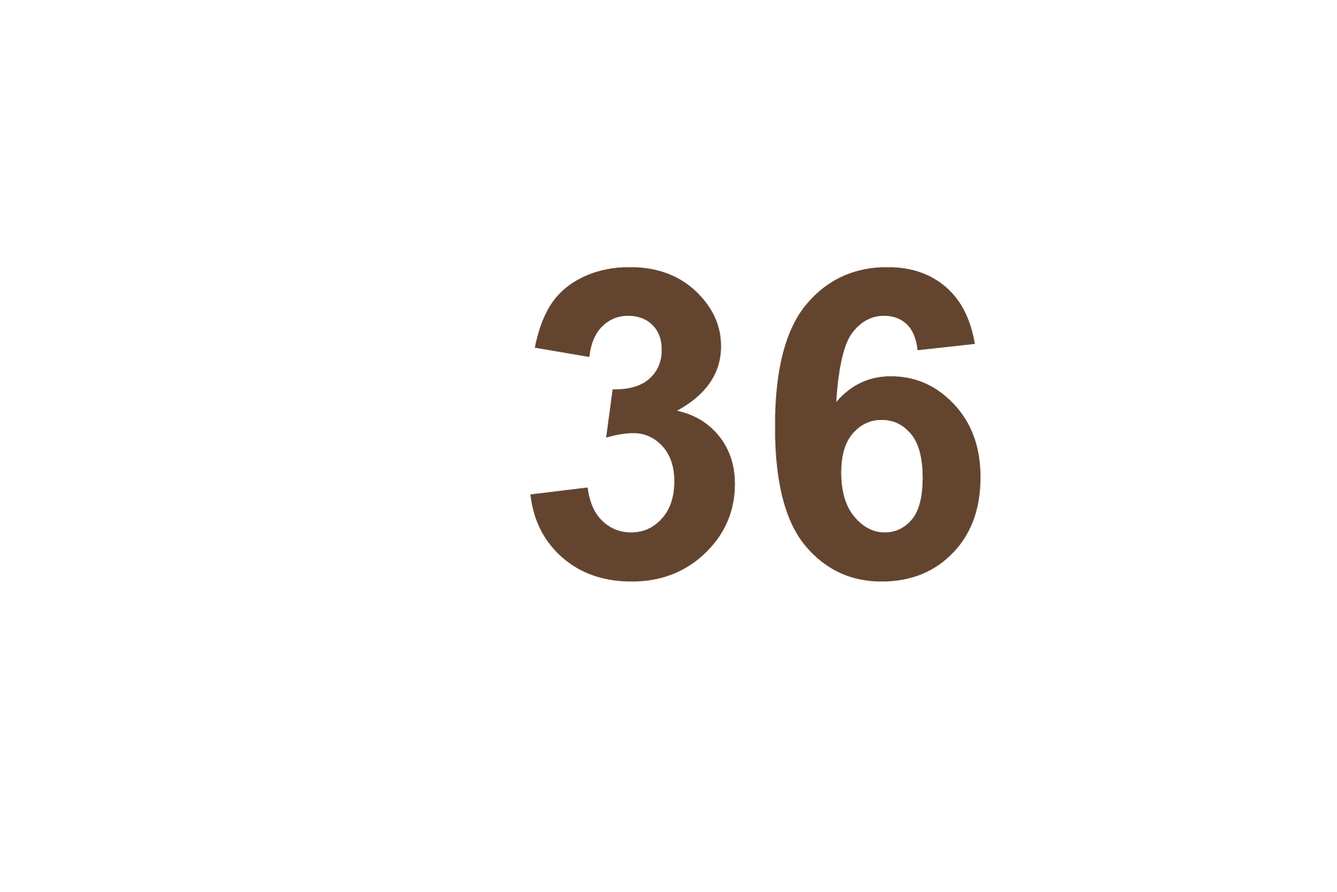
<style>
.page{position:relative;width:1337px;height:892px;background:#ffffff}
.page>*{position:absolute;margin:0}
.t1{font:429.6px "Arial-BoldMT";color:#63442f}
</style>
<div class="page">
<p class="t1" style="left:531px;top:267px;width:450px;height:315px">36</p>
</div>
